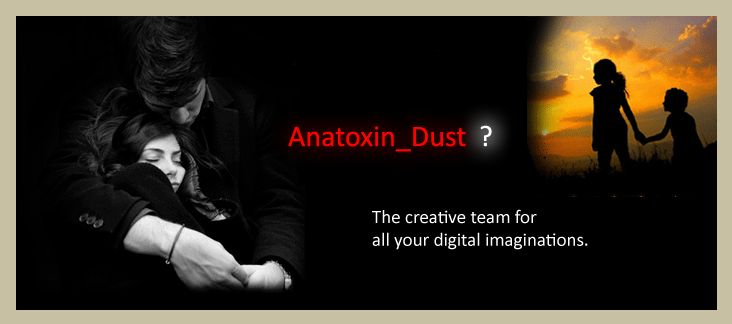
<style>
.page{position:relative;width:732px;height:324px;background:#000000}
.page>*{position:absolute;margin:0}
.t1{font:30px "Calibri";color:#ff0000}
.t2{font:30px "Calibri";color:#ffffff}
.t3{font:19px "Calibri";color:#ffffff}
</style>
<div class="page">
<p class="t1" style="left:269px;top:114px;width:217px;height:41px">Anatoxin_Dust</p>
<p class="t2" style="left:461px;top:114px;width:52px;height:41px">?</p>
<p class="t3" style="left:372px;top:209px;width:216px;height:41px">The creative team for<br>all your digital imaginations.</p>
</div>
